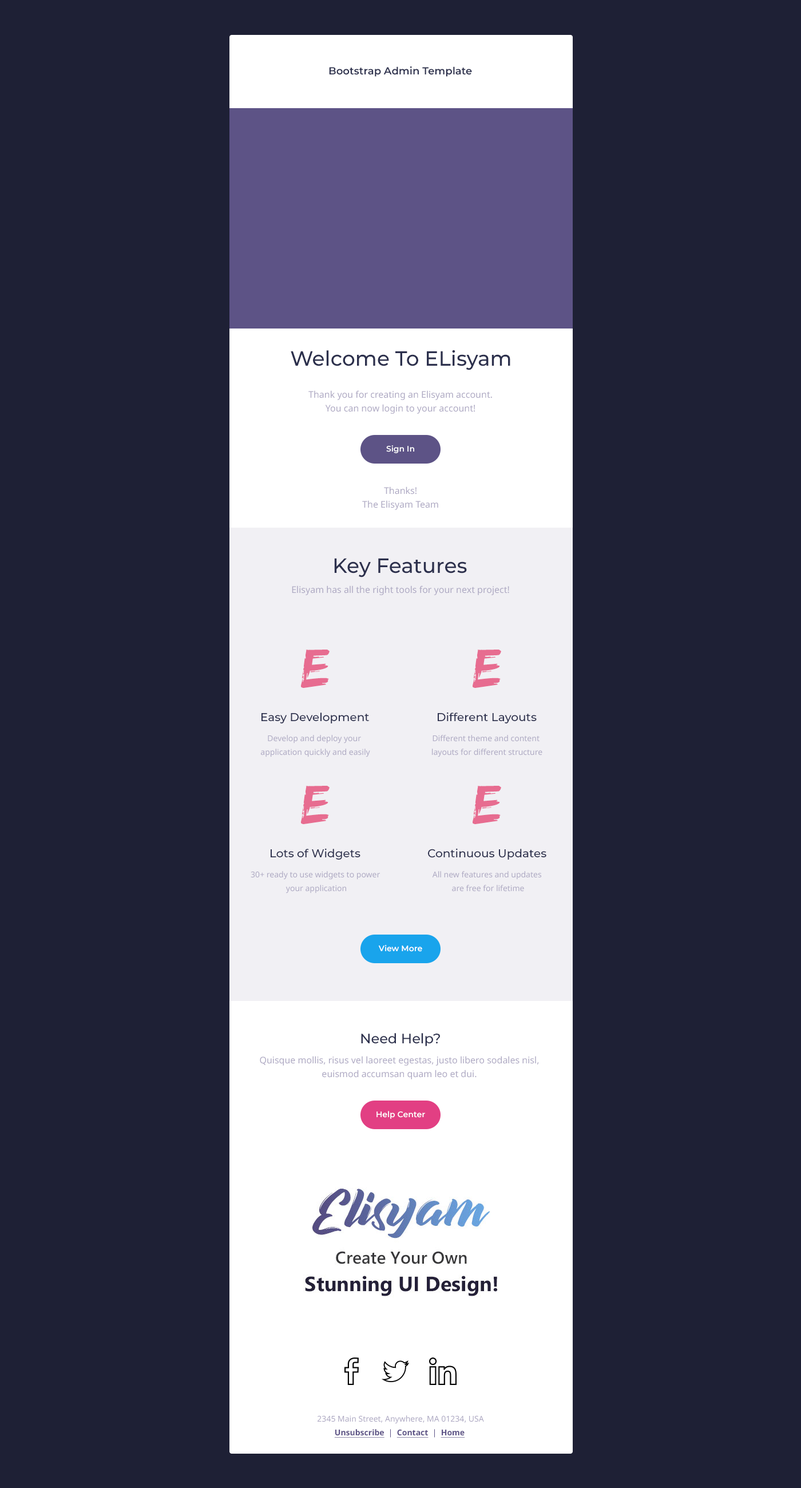
<style>
.page{position:relative;width:801px;height:1488px;background:#1e2035}
.page>*{position:absolute;margin:0}
.t1{font:10.3px "Montserrat-SemiBold";color:#2c304d}
.t2{font:20.6px "Montserrat-Medium";color:#2c304d}
.t3{font:8px "Montserrat-SemiBold";color:#ffffff}
.t4{font:9.2px "NotoSans-Regular";color:#aea9c3}
.t5{font:57.2px "Edo";color:#e76c90}
.t6{font:11.4px "Montserrat-Medium";color:#2c304d}
.t7{font:8px/13.7px "NotoSans-Regular";color:#aea9c3}
.t8{font:13.7px "Montserrat-Medium";color:#2c304d}
.t9{font:9.2px/13.7px "NotoSans-Regular";color:#aea9c3}
.t10{font:8px/13.7px "NotoSans-Bold";color:#5d5386;text-decoration:underline}
.t11{font:8px/13.7px "NotoSans-Regular";color:#5d5386}
</style>
<div class="page">
<p class="t1" style="left:329px;top:66px;width:143px;height:11px">Bootstrap Admin Template</p>
<p class="t2" style="left:291px;top:350px;width:220px;height:20px">Welcome To ELisyam</p>
<p class="t3" style="left:386px;top:445px;width:28px;height:8px">Sign In</p>
<p class="t2" style="left:334px;top:558px;width:133px;height:20px">Key Features</p>
<p class="t4" style="left:292px;top:586px;width:217px;height:9px">Elisyam has all the right tools for your next project!</p>
<p class="t5" style="left:301px;top:650px;width:29px;height:38px">e</p>
<p class="t5" style="left:473px;top:650px;width:28px;height:38px">e</p>
<p class="t6" style="left:262px;top:713px;width:107px;height:10px">Easy Development</p>
<p class="t6" style="left:438px;top:712px;width:99px;height:11px">Different Layouts</p>
<p class="t7" style="left:261px;top:735px;width:109px;height:22px;text-align:center">Develop and deploy your <br>application quickly and easily</p>
<p class="t7" style="left:432px;top:735px;width:111px;height:22px;text-align:center">Different theme and content <br>layouts for different structure</p>
<p class="t5" style="left:301px;top:786px;width:29px;height:38px">e</p>
<p class="t5" style="left:473px;top:786px;width:28px;height:38px">e</p>
<p class="t6" style="left:271px;top:848px;width:90px;height:12px">Lots of Widgets</p>
<p class="t6" style="left:428px;top:848px;width:119px;height:12px">Continuous Updates</p>
<p class="t7" style="left:251px;top:871px;width:129px;height:22px;text-align:center">30+ ready to use widgets to power <br>your application</p>
<p class="t7" style="left:432px;top:871px;width:109px;height:21px;text-align:center">All new features and updates <br>are free for lifetime</p>
<p class="t3" style="left:378px;top:945px;width:44px;height:7px">View More</p>
<p class="t8" style="left:361px;top:1033px;width:79px;height:13px">Need Help?</p>
<p class="t9" style="left:260px;top:1056px;width:279px;height:23px;text-align:center">Quisque mollis, risus vel laoreet egestas, justo libero sodales nisl, <br>euismod accumsan quam leo et dui.</p>
<p class="t3" style="left:377px;top:1111px;width:48px;height:8px">Help Center</p>
<p class="t7" style="left:318px;top:1415px;width:166px;height:23px;text-align:center">2345 Main Street, Anywhere, MA 01234, USA<br><span class="t10">Unsubscribe</span><span class="t11">  |  </span><span class="t10">Contact</span><span class="t11">  |  </span><span class="t10">Home</span></p>
</div>
